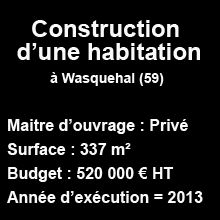
<style>
.page{position:relative;width:220px;height:220px;background:#000000}
.page>*{position:absolute;margin:0}
.t1{font:24px/23px "Arial-BoldMT";color:#f9f9f9}
.t2{font:14px/23px "Arial-BoldMT";color:#f9f9f9}
.t3{font:16px/24px "Arial-BoldMT";color:#f9f9f9}
</style>
<div class="page">
<p class="t1" style="left:17px;top:20px;width:183px;height:66px;text-align:center">Construction <br>d’une habitation<br><span class="t2">à Wasquehal (59)</span></p>
<p class="t3" style="left:7px;top:119px;width:196px;height:84px">Maitre d’ouvrage : Privé<br>Surface : 337 m²<br>Budget : 520 000 € HT<br>Année d’exécution = 2013</p>
</div>
